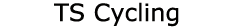
<style>
.page{position:relative;width:234px;height:28px;background:#ffffff}
.page>*{position:absolute;margin:0}
.t1{font:24px "Verdana";color:#030201}
</style>
<div class="page">
<p class="t1" style="left:54px;top:2px;width:125px;height:25px">TS Cycling</p>
</div>
